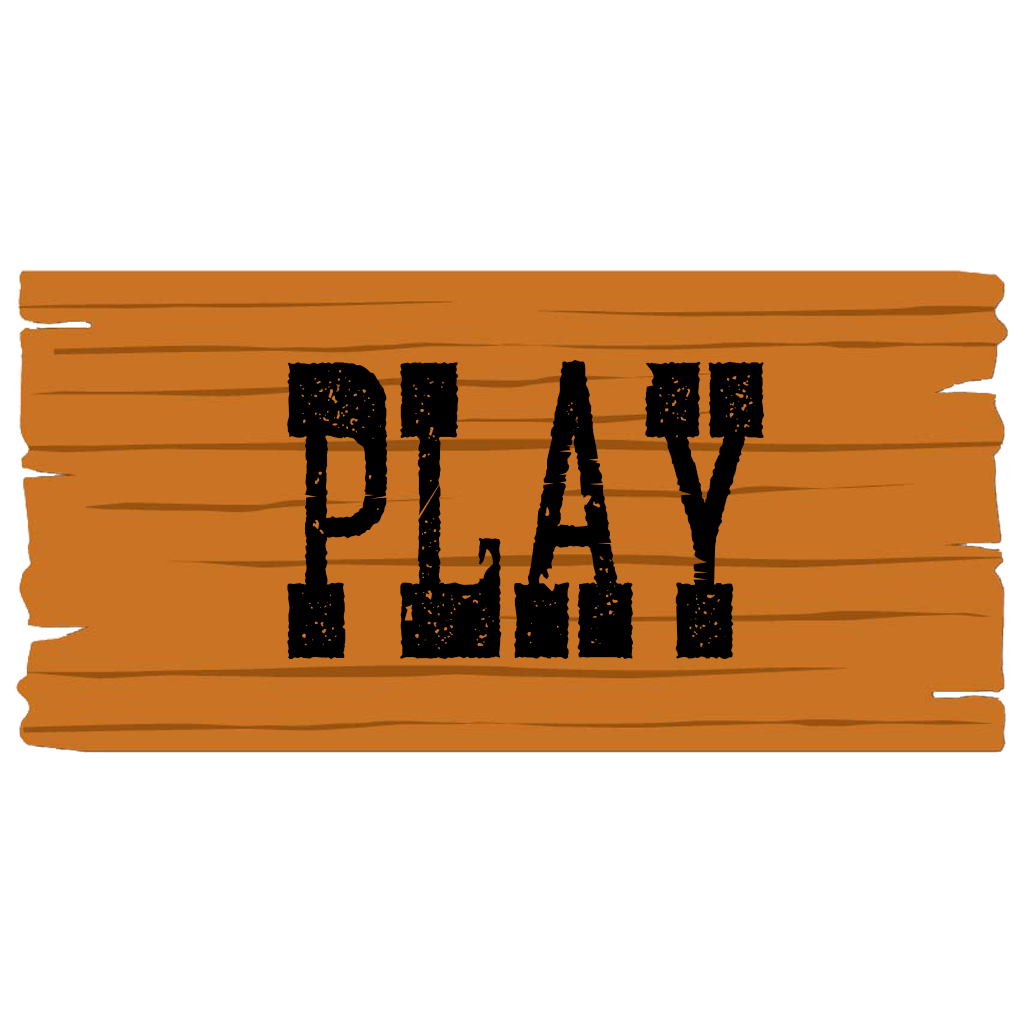
<style>
.page{position:relative;width:1024px;height:1024px;background:#ffffff}
.page>*{position:absolute;margin:0}
.t1{font:256px "DurangoWesternEroded";color:#000000}
</style>
<div class="page">
<p class="t1" style="left:287px;top:359px;width:478px;height:301px">PLAY</p>
</div>
